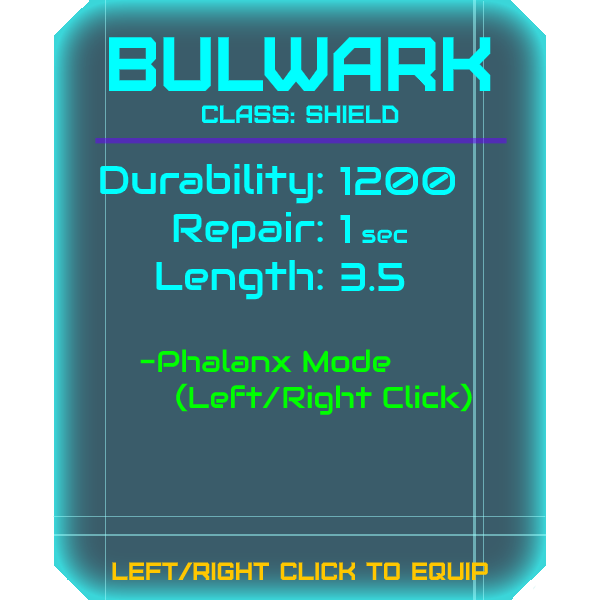
<style>
.page{position:relative;width:600px;height:600px;background:#3a5c6a}
.page>*{position:absolute;margin:0}
.t1{font:76.8px "Furore";color:#00ffff}
.t2{font:25px "Furore";color:#00ffff}
.t3{font:40px "Audiowide-Regular";color:#00ffff}
.t4{font:25px "Audiowide-Regular";color:#00ffff}
.t5{font:30px "Audiowide-Regular";color:#00ff00}
.t6{font:25px "Furore";color:#ffc700}
</style>
<div class="page">
<p class="t1" style="left:109px;top:37px;width:382px;height:54px">bulwark</p>
<p class="t2" style="left:202px;top:105px;width:197px;height:18px">Class: shield</p>
<p class="t3" style="left:100px;top:163px;width:223px;height:137px;text-align:right">Durability:<br>Repair:<br>Length:</p>
<p class="t3" style="left:340px;top:166px;width:116px;height:125px">1200<br>1 <span class="t4">sec<br></span>3.5</p>
<p class="t5" style="left:140px;top:349px;width:332px;height:66px">-Phalanx Mode<br> (Left/Right Click)</p>
<p class="t6" style="left:112px;top:562px;width:376px;height:18px">left/right click to equip</p>
</div>
